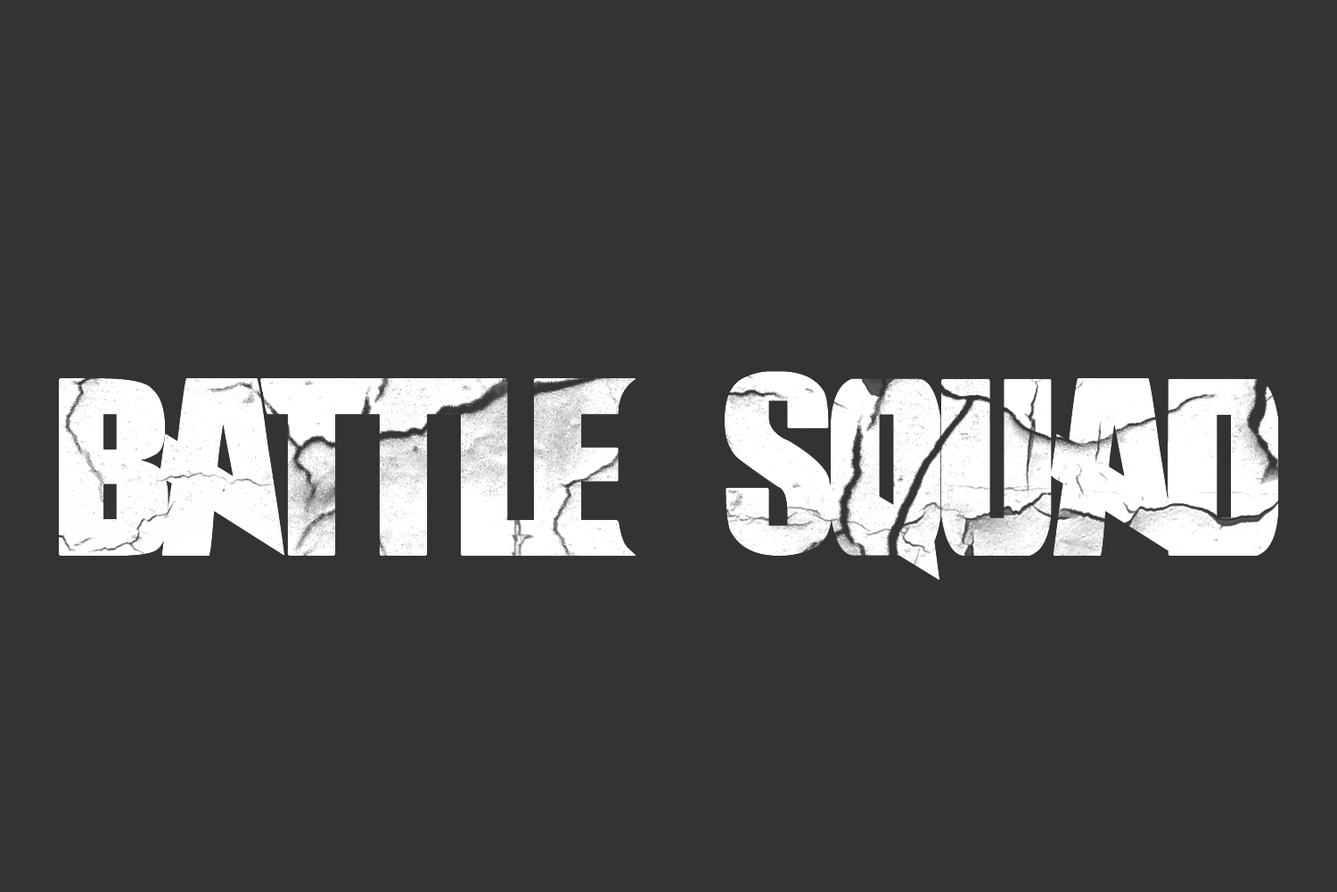
<style>
.page{position:relative;width:1337px;height:892px;background:#333333}
.page>*{position:absolute;margin:0}
.t1{font:327.6px "Battleground";letter-spacing:-0.025em;color:#ffffff;text-transform:uppercase}
</style>
<div class="page">
<p class="t1" style="left:59px;top:371px;width:1220px;height:209px">battle squad</p>
</div>
